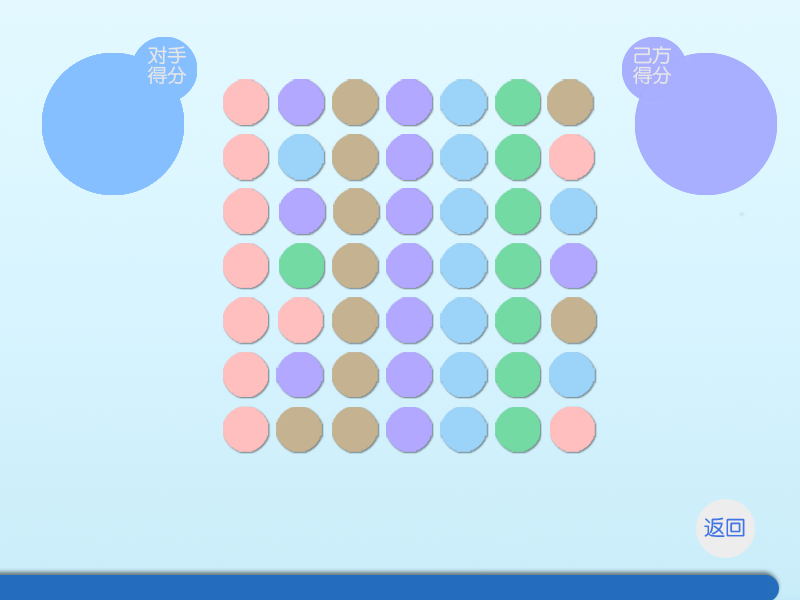
<style>
.page{position:relative;width:800px;height:600px}
.page>*{position:absolute;margin:0}
.t1{font:18.9px/19.8px "FZY3JW--GB1-0";color:#e6e6e6}
.t2{font:21px "FZY3JW--GB1-0";color:#3f76e4}
</style>
<div class="page">
<p class="t1" style="left:147px;top:46px;width:40px;height:39px">对手<br>得分</p>
<p class="t1" style="left:633px;top:46px;width:39px;height:39px">己方<br>得分</p>
<p class="t2" style="left:704px;top:517px;width:41px;height:21px">返回</p>
</div>
